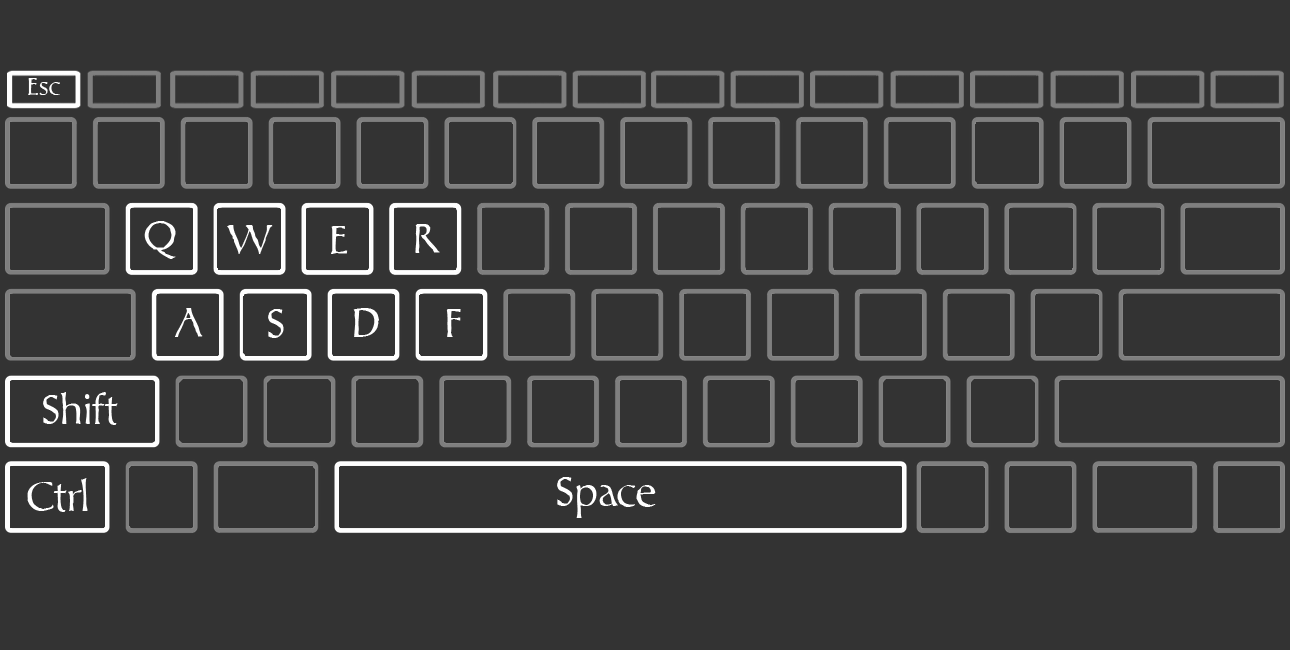
<style>
.page{position:relative;width:1290px;height:650px;background:#333333}
.page>*{position:absolute;margin:0}
.t1{font:25px "PlatoMedium";color:#ffffff}
.t2{font:41.7px "PlatoMedium";color:#ffffff}
</style>
<div class="page">
<p class="t1" style="left:28px;top:78px;width:32px;height:17px">Esc</p>
<p class="t2" style="left:144px;top:221px;width:32px;height:38px">Q</p>
<p class="t2" style="left:227px;top:225px;width:46px;height:29px">W</p>
<p class="t2" style="left:331px;top:226px;width:17px;height:28px">E</p>
<p class="t2" style="left:415px;top:224px;width:25px;height:29px">R</p>
<p class="t2" style="left:175px;top:308px;width:28px;height:29px">A</p>
<p class="t2" style="left:268px;top:309px;width:16px;height:29px">S</p>
<p class="t2" style="left:353px;top:308px;width:26px;height:29px">D</p>
<p class="t2" style="left:446px;top:309px;width:15px;height:28px">F</p>
<p class="t2" style="left:43px;top:392px;width:75px;height:33px">Shift</p>
<p class="t2" style="left:27px;top:478px;width:61px;height:34px">Ctrl</p>
<p class="t2" style="left:557px;top:477px;width:99px;height:41px">Space</p>
</div>
